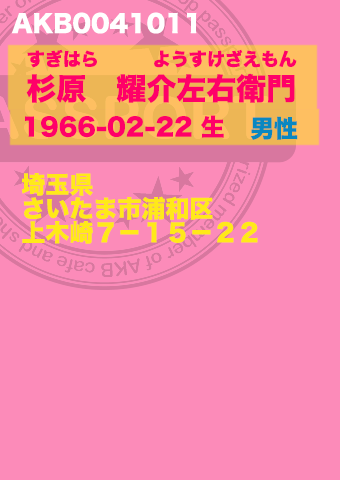
<style>
.page{position:relative;width:340px;height:480px;background:#fc8bb9}
.page>*{position:absolute;margin:0}
.t1{font:24px "HiraKakuStdN-W8";color:#ffffff}
.t2{font:18px "HiraKakuStdN-W8";color:#ff0068}
.t3{font:30px "HiraKakuStdN-W8";color:#ff0068}
.t4{font:24px "HiraKakuStdN-W8";color:#ff0068}
.t5{font:24px "HiraKakuStdN-W8";color:#0987c1}
.t6{font:24px/24px "HiraKakuStdN-W8";color:#ffe919}
</style>
<div class="page">
<p class="t1" style="left:11px;top:12px;width:186px;height:22px">AKB0041011</p>
<p class="t2" style="left:27px;top:49px;width:270px;height:19px">すぎはら　　　ようすけざえもん</p>
<p class="t3" style="left:26px;top:74px;width:269px;height:29px">杉原　耀介左右衛門</p>
<p class="t4" style="left:25px;top:115px;width:199px;height:23px">1966-02-22 生</p>
<p class="t5" style="left:250px;top:116px;width:48px;height:24px">男性</p>
<p class="t6" style="left:21px;top:173px;width:237px;height:71px">埼玉県<br>さいたま市浦和区<br>上木崎７−１５−２２</p>
</div>
